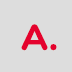
<style>
.page{position:relative;width:72px;height:72px;background:#dddddd}
.page>*{position:absolute;margin:0}
.t1{font:36px "Nunito-ExtraBold";color:#e4022d}
</style>
<div class="page">
<p class="t1" style="left:21px;top:24px;width:36px;height:27px">A.</p>
</div>
